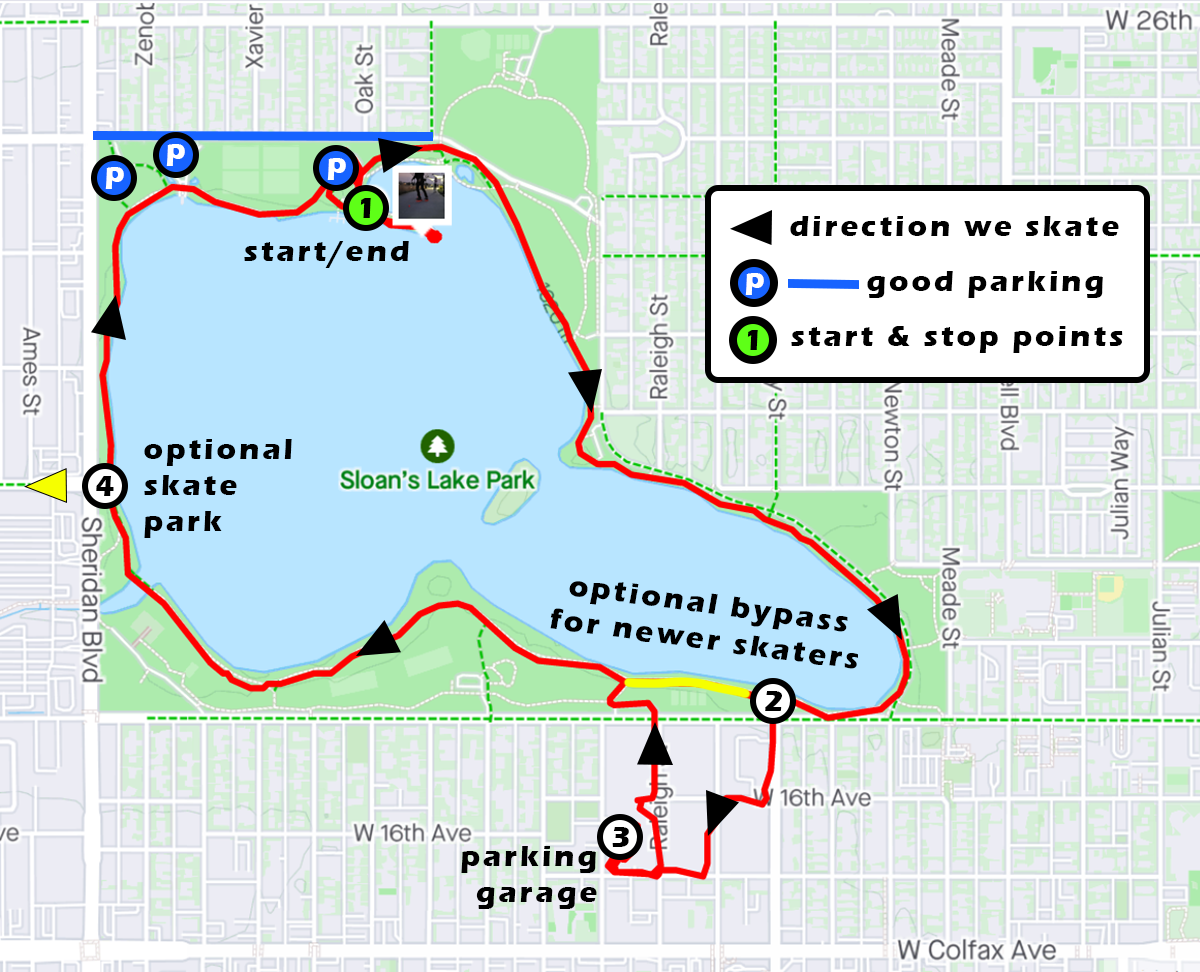
<style>
.page{position:relative;width:1200px;height:972px}
.page>*{position:absolute;margin:0}
.t1{font:30px "ErasITC-Bold";letter-spacing:0.1em;color:#ffffff}
.t2{font:30px "ErasITC-Bold";letter-spacing:0.1em;color:#000000}
.t3{font:29.8px "ErasITC-Bold";letter-spacing:0.1em;color:#000000}
</style>
<div class="page">
<p class="t1" style="left:166px;top:144px;width:19px;height:22px">p</p>
<p class="t1" style="left:327px;top:158px;width:19px;height:22px">p</p>
<p class="t1" style="left:105px;top:167px;width:19px;height:22px">p</p>
<p class="t2" style="left:360px;top:198px;width:11px;height:20px">1</p>
<p class="t2" style="left:790px;top:216px;width:329px;height:20px">direction we skate</p>
<p class="t2" style="left:244px;top:241px;width:165px;height:27px">start/end</p>
<p class="t1" style="left:745px;top:273px;width:19px;height:22px">p</p>
<p class="t2" style="left:867px;top:271px;width:236px;height:27px">good parking</p>
<p class="t2" style="left:791px;top:326px;width:332px;height:27px">start &amp; stop points</p>
<p class="t2" style="left:747px;top:330px;width:11px;height:20px">1</p>
<p class="t2" style="left:144px;top:439px;width:148px;height:99px">optional<br>skate<br>park</p>
<p class="t2" style="left:96px;top:476px;width:18px;height:20px">4</p>
<p class="t3" style="left:550px;top:581px;width:308px;height:88px;text-align:center;rotate:8deg">optional bypass<br>for newer skaters</p>
<p class="t2" style="left:765px;top:691px;width:17px;height:20px">2</p>
<p class="t2" style="left:612px;top:827px;width:17px;height:20px">3</p>
<p class="t2" style="left:461px;top:846px;width:136px;height:63px;text-align:right">parking<br>garage</p>
</div>
